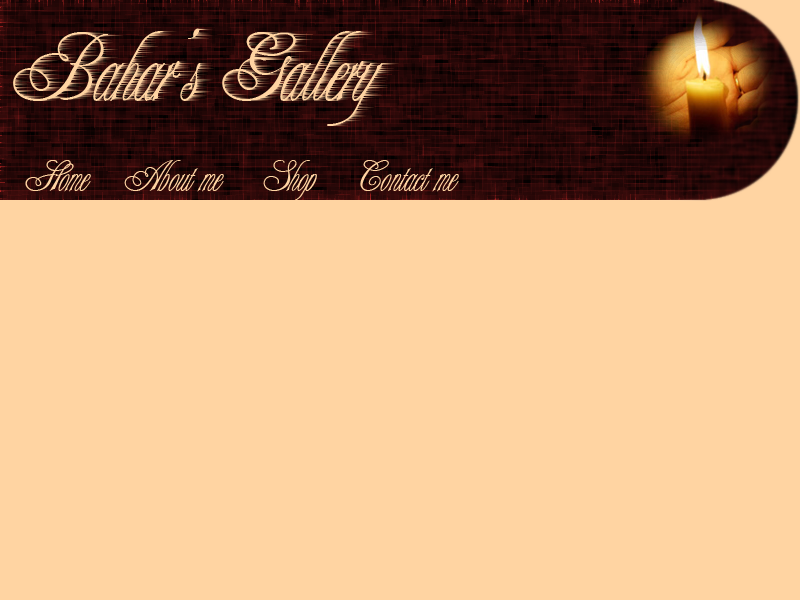
<style>
.page{position:relative;width:800px;height:600px;background:#ffd4a2}
.page>*{position:absolute;margin:0}
.t1{font:40px "AlexeiCopperplateITC";color:#ffd4a2}
</style>
<div class="page">
<p class="t1" style="left:25px;top:160px;width:66px;height:32px">Home</p>
<p class="t1" style="left:124px;top:160px;width:100px;height:32px">About me</p>
<p class="t1" style="left:263px;top:160px;width:54px;height:42px">Shop</p>
<p class="t1" style="left:360px;top:160px;width:99px;height:32px">Contact me</p>
</div>
